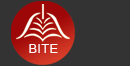
<style>
.page{position:relative;width:130px;height:66px;background:#333333}
.page>*{position:absolute;margin:0}
.t1{font:14.3px "Gautami";letter-spacing:0.01em;color:#ffffff}
</style>
<div class="page">
<p class="t1" style="left:29px;top:44px;width:29px;height:9px">BITE</p>
</div>
